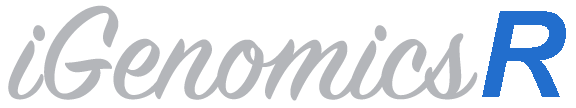
<style>
.page{position:relative;width:576px;height:108px;background:#ffffff}
.page>*{position:absolute;margin:0}
.t1{font:146.7px "SignPainter-HouseScript";color:#b4b6ba}
.t2{font:120px "Arial-BoldItalicMT";color:#226ecd}
</style>
<div class="page">
<p class="t1" style="left:8px;top:5px;width:470px;height:96px">iGenomics</p>
<p class="t2" style="left:482px;top:11px;width:84px;height:86px">R</p>
</div>
